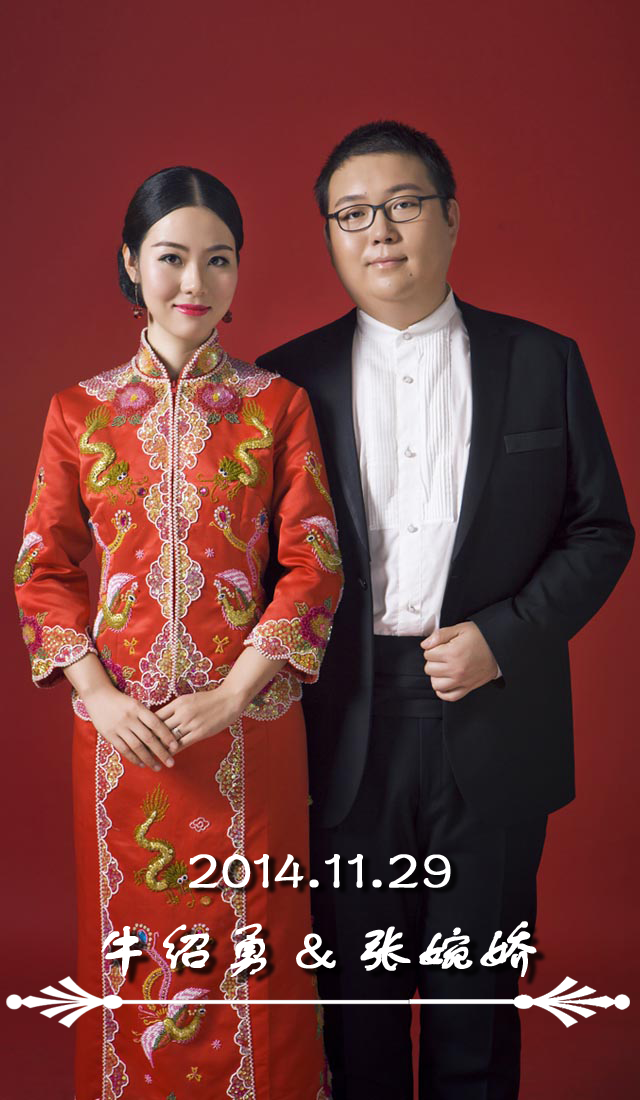
<style>
.page{position:relative;width:640px;height:1100px}
.page>*{position:absolute;margin:0}
.t1{font:60px "FZSTK--GBK1-0";color:#ffffff;font-weight:bold}
</style>
<div class="page">
<p class="t1" style="left:189px;top:854px;width:262px;height:34px">2014.11.29</p>
<p class="t1" style="left:101px;top:921px;width:436px;height:56px">牛绍勇 &amp; 张婉娇</p>
</div>
